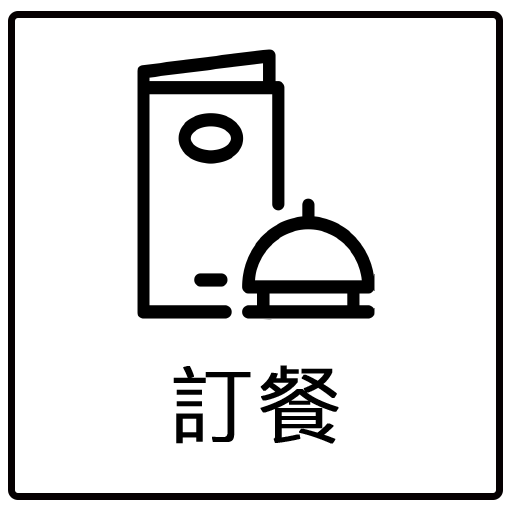
<style>
.page{position:relative;width:512px;height:512px;background:#ffffff}
.page>*{position:absolute;margin:0}
.t1{font:83.3px "PingFangTC-Light";letter-spacing:0.026em;color:#000000;font-weight:bold}
</style>
<div class="page">
<p class="t1" style="left:173px;top:365px;width:166px;height:79px">訂餐</p>
</div>
